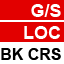
<style>
.page{position:relative;width:64px;height:64px;background:#e20000}
.page>*{position:absolute;margin:0}
.t1{font:18px "Arial-BoldMT";color:#ffffff}
.t2{font:16px "Arial-BoldMT";color:#000000}
</style>
<div class="page">
<p class="t1" style="left:31px;top:4px;width:30px;height:13px">G/S</p>
<p class="t1" style="left:24px;top:26px;width:36px;height:13px">LOC</p>
<p class="t2" style="left:1px;top:48px;width:60px;height:12px">BK CRS</p>
</div>
